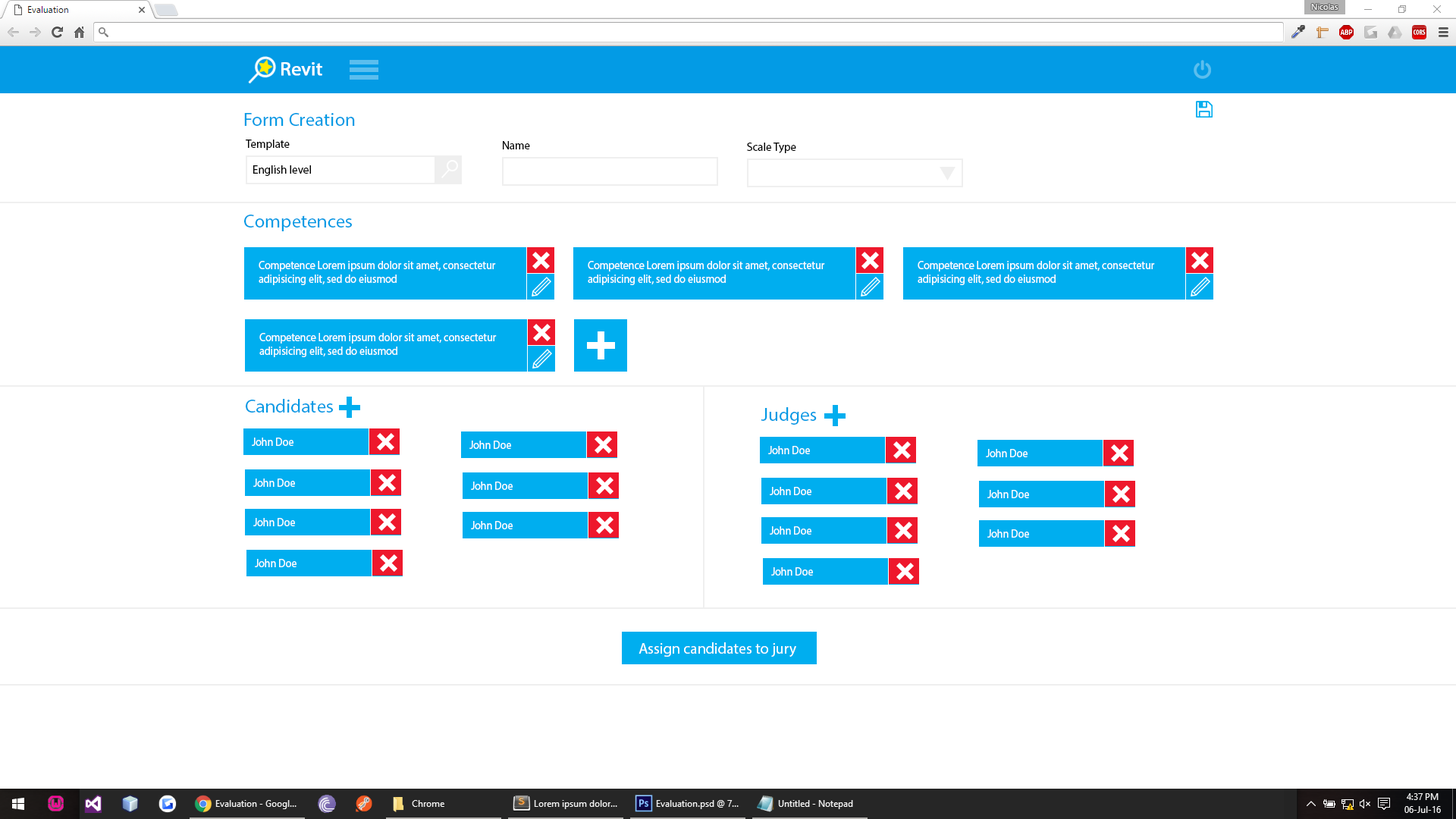
<style>
.page{position:relative;width:1456px;height:819px;background:#ffffff}
.page>*{position:absolute;margin:0}
.t1{font:19px "MyriadPro-Regular";color:#ffffff;font-weight:bold}
.t2{font:19px "MyriadPro-Regular";color:#039be5}
.t3{font:11.4px "MyriadPro-Regular";color:#000000}
.t4{font:11.4px "MyriadPro-Regular";color:#ffffff;scale:0.93 1}
.t5{font:15.2px "MyriadPro-Regular";color:#ffffff}
</style>
<div class="page">
<p class="t1" style="left:281px;top:62px;width:41px;height:14px">Revit</p>
<p class="t2" style="left:244px;top:113px;width:111px;height:13px">Form Creation</p>
<p class="t3" style="left:246px;top:140px;width:44px;height:10px">Template</p>
<p class="t3" style="left:503px;top:141px;width:27px;height:8px">Name</p>
<p class="t3" style="left:747px;top:143px;width:49px;height:10px">Scale Type</p>
<p class="t3" style="left:253px;top:165px;width:58px;height:11px">English level</p>
<p class="t2" style="left:244px;top:215px;width:108px;height:16px">Competences</p>
<p class="t4" style="left:259px;top:261px;width:237px;height:24px">Competence Lorem ipsum dolor sit amet, consectetur adipisicing elit, sed do eiusmod</p>
<p class="t4" style="left:588px;top:261px;width:237px;height:24px">Competence Lorem ipsum dolor sit amet, consectetur adipisicing elit, sed do eiusmod</p>
<p class="t4" style="left:918px;top:261px;width:237px;height:24px">Competence Lorem ipsum dolor sit amet, consectetur adipisicing elit, sed do eiusmod</p>
<p class="t4" style="left:259px;top:333px;width:238px;height:24px">Competence Lorem ipsum dolor sit amet, consectetur adipisicing elit, sed do eiusmod</p>
<p class="t2" style="left:246px;top:399px;width:87px;height:14px">Candidates</p>
<p class="t2" style="left:761px;top:407px;width:56px;height:18px">Judges</p>
<p class="t4" style="left:252px;top:438px;width:41px;height:8px">John Doe</p>
<p class="t4" style="left:469px;top:441px;width:42px;height:8px">John Doe</p>
<p class="t4" style="left:768px;top:446px;width:42px;height:8px">John Doe</p>
<p class="t4" style="left:986px;top:449px;width:42px;height:8px">John Doe</p>
<p class="t4" style="left:253px;top:479px;width:42px;height:8px">John Doe</p>
<p class="t4" style="left:471px;top:482px;width:42px;height:8px">John Doe</p>
<p class="t4" style="left:770px;top:487px;width:41px;height:8px">John Doe</p>
<p class="t4" style="left:987px;top:490px;width:42px;height:8px">John Doe</p>
<p class="t4" style="left:253px;top:518px;width:42px;height:8px">John Doe</p>
<p class="t4" style="left:471px;top:521px;width:42px;height:8px">John Doe</p>
<p class="t4" style="left:770px;top:526px;width:41px;height:9px">John Doe</p>
<p class="t4" style="left:987px;top:529px;width:42px;height:9px">John Doe</p>
<p class="t4" style="left:255px;top:559px;width:42px;height:8px">John Doe</p>
<p class="t4" style="left:771px;top:567px;width:42px;height:9px">John Doe</p>
<p class="t5" style="left:639px;top:642px;width:157px;height:15px">Assign candidates to jury</p>
</div>
